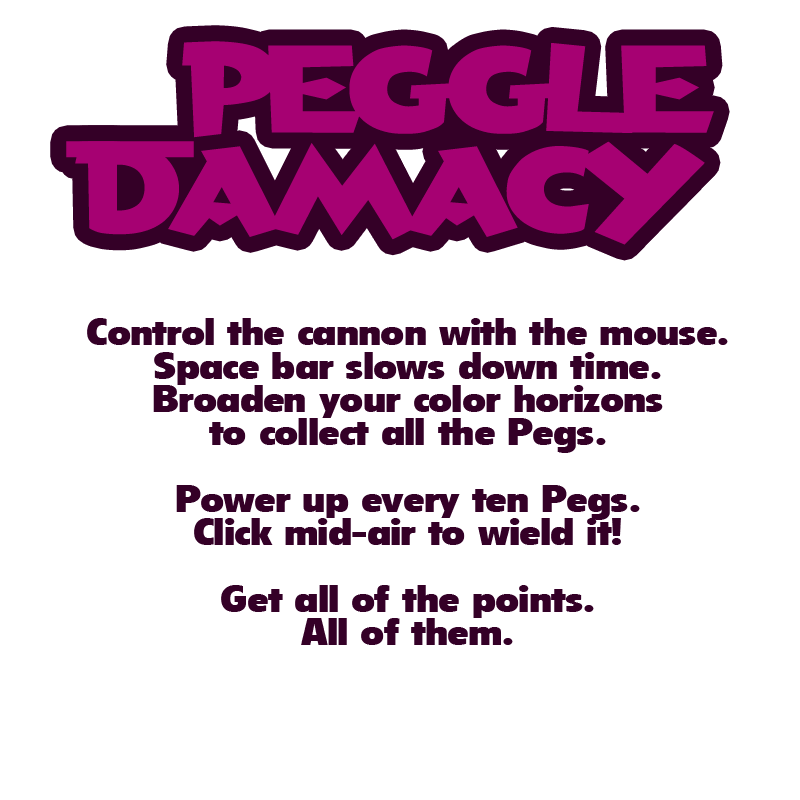
<style>
.page{position:relative;width:800px;height:800px;background:#ffffff}
.page>*{position:absolute;margin:0}
.t1{font:128px/33.3px "AndersonTorchyTheBatteryBoy";letter-spacing:-0.1em;color:#a60172;scale:1.25 1}
.t2{font:37.3px/33.3px "ThereSignHead3";letter-spacing:-0.02em;color:#340027;scale:1.25 1}
</style>
<div class="page">
<p class="t1" style="left:66px;top:41px;width:648px;height:204px;text-align:center">_Peggle<br><br><br>Damacy</p>
<p class="t2" style="left:87px;top:318px;width:641px;height:327px;text-align:center">Control the cannon with the mouse.<br>Space bar slows down time.<br>Broaden your color horizons<br>to collect all the Pegs.<br><br>Power up every ten Pegs.<br>Click mid-air to wield it!<br><br>Get all of the points.<br>All of them.</p>
</div>
